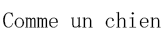
<style>
.page{position:relative;width:166px;height:41px;background:#ffffff}
.page>*{position:absolute;margin:0}
.t1{font:22.7px "MS-Mincho";color:#000000}
</style>
<div class="page">
<p class="t1" style="left:3px;top:11px;width:158px;height:17px">Comme un chien</p>
</div>
